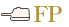
<style>
.page{position:relative;width:69px;height:27px;background:#ffffff}
.page>*{position:absolute;margin:0}
.t1{font:22px "RyuminPro-ExBold";letter-spacing:-0.04em;color:#af9441}
</style>
<div class="page">
<p class="t1" style="left:34px;top:6px;width:28px;height:16px">FP</p>
</div>
